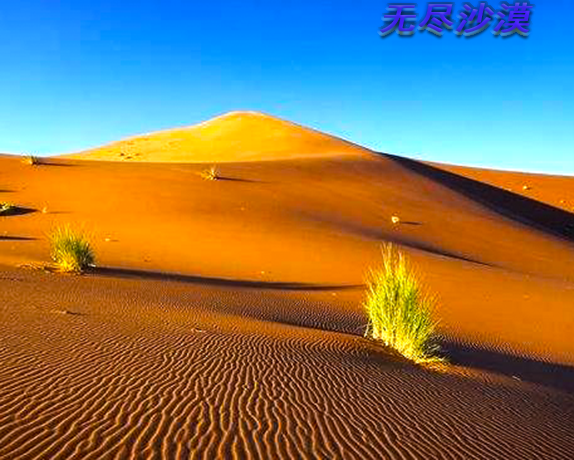
<style>
.page{position:relative;width:574px;height:460px}
.page>*{position:absolute;margin:0}
.t1{font:32.1px "SimHei";color:#3d28e7;font-weight:bold;font-style:italic;scale:1.16 1}
</style>
<div class="page">
<p class="t1" style="left:380px;top:2px;width:153px;height:31px">无尽沙漠</p>
</div>
